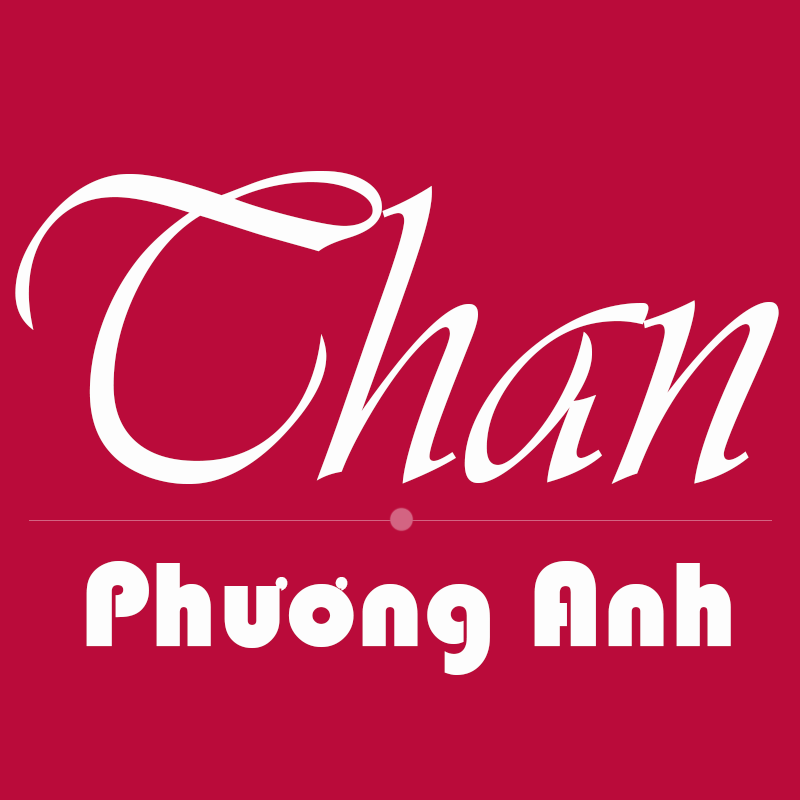
<style>
.page{position:relative;width:800px;height:800px;background:#ba0b3a}
.page>*{position:absolute;margin:0}
.t1{font:443.7px "Vivaldii";color:#fdfdfd;scale:0.88 1}
.t2{font:125.5px "Bauhaus93";color:#fdfdfd}
.t3{font:50.7px "Bauhaus93";color:#fdfdfd}
</style>
<div class="page">
<p class="t1" style="left:15px;top:171px;width:764px;height:313px">Than</p>
<p class="t2" style="left:86px;top:561px;width:645px;height:114px">Phuong Anh</p>
<p class="t3" style="left:275px;top:577px;width:13px;height:14px">,</p>
<p class="t3" style="left:335px;top:577px;width:13px;height:14px">,</p>
</div>
